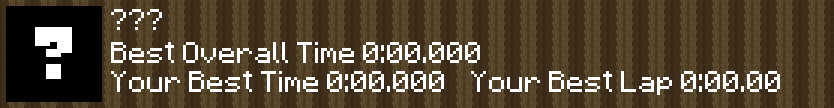
<style>
.page{position:relative;width:834px;height:108px;background:#41301d}
.page>*{position:absolute;margin:0}
.t1{font:24px "Minecraft";color:#ffffff}
</style>
<div class="page">
<p class="t1" style="left:111px;top:9px;width:51px;height:21px">???</p>
<p class="t1" style="left:111px;top:42px;width:669px;height:53px">Best Overall Time 0:00.000<br>Your Best Time 0:00.000 Your Best Lap 0:00.00</p>
</div>
